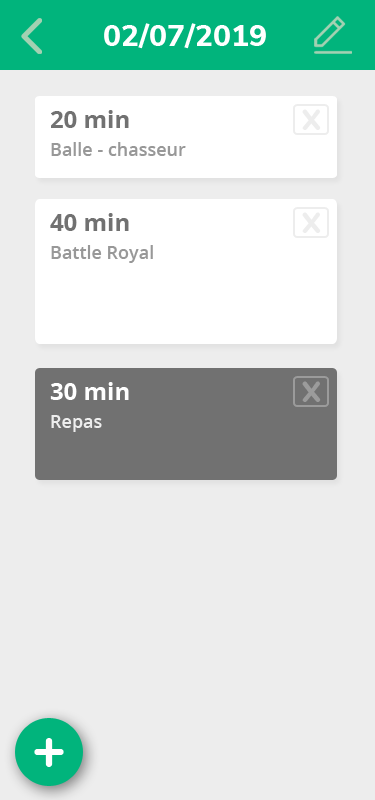
<style>
.page{position:relative;width:375px;height:800px;background:#ededed}
.page>*{position:absolute;margin:0}
.t1{font:30px "NunitoSans-ExtraBold";color:#ffffff}
.t2{font:24px "OpenSans-Bold";color:#717171}
.t3{font:37.6px "Quicksand-Bold";color:#ededed}
.t4{font:18px "OpenSans-SemiBold";color:#989898}
.t5{font:24px "OpenSans-Bold";color:#ffffff}
.t6{font:37.6px "Quicksand-Bold";color:#9b9b9b}
.t7{font:18px "OpenSans-SemiBold";color:#ededed}
.t8{font:60px "Nunito-ExtraBold";color:#ffffff}
</style>
<div class="page">
<p class="t1" style="left:104px;top:23px;width:162px;height:26px">02/07/2019</p>
<p class="t2" style="left:51px;top:110px;width:78px;height:18px">20 min</p>
<p class="t3" style="left:302px;top:109px;width:19px;height:21px">x</p>
<p class="t4" style="left:51px;top:142px;width:135px;height:14px">Balle - chasseur</p>
<p class="t2" style="left:50px;top:213px;width:79px;height:18px">40 min</p>
<p class="t3" style="left:302px;top:212px;width:19px;height:21px">x</p>
<p class="t4" style="left:51px;top:245px;width:102px;height:18px">Battle Royal</p>
<p class="t5" style="left:50px;top:382px;width:79px;height:18px">30 min</p>
<p class="t6" style="left:302px;top:381px;width:19px;height:21px">x</p>
<p class="t7" style="left:51px;top:415px;width:51px;height:17px">Repas</p>
<p class="t8" style="left:34px;top:738px;width:30px;height:29px">+</p>
</div>
